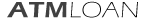
<style>
.page{position:relative;width:148px;height:19px;background:#ffffff}
.page>*{position:absolute;margin:0}
.t1{font:23.1px "ErasITC-Demi";color:#404040;scale:1.18 1}
.t2{font:23.1px "ErasITC-Light";color:#060606;scale:1.18 1}
</style>
<div class="page">
<p class="t1" style="left:7px;top:2px;width:60px;height:16px">ATM</p>
<p class="t2" style="left:70px;top:1px;width:68px;height:17px">LOAN</p>
</div>
